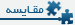
<style>
.page{position:relative;width:75px;height:25px;background:#f1f2f2}
.page>*{position:absolute;margin:0}
.t1{font:12.9px "BYekan";color:#165c87}
</style>
<div class="page">
<p class="t1" style="left:6px;top:6px;width:38px;height:10px">مقـایسه</p>
</div>
